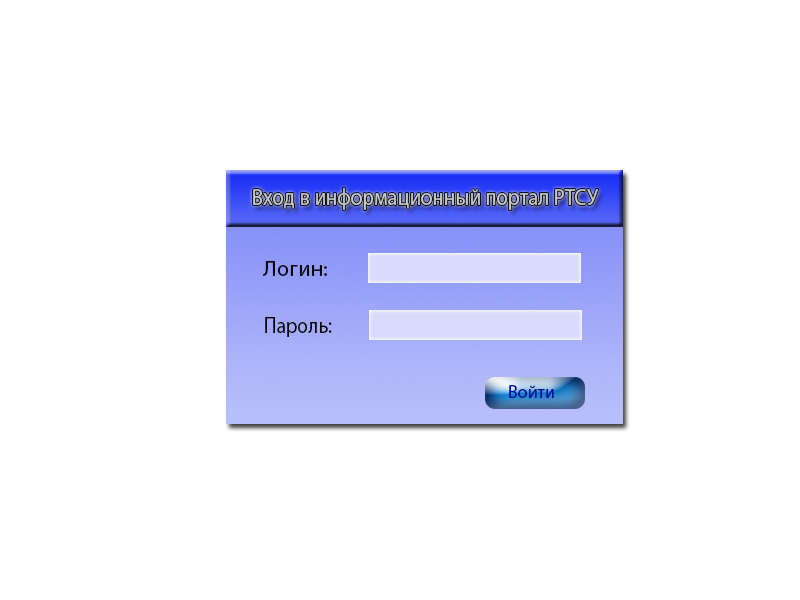
<style>
.page{position:relative;width:800px;height:600px;background:#ffffff}
.page>*{position:absolute;margin:0}
.t1{font:23px "MyriadPro-Regular";color:#c7c9c9;scale:0.91 1}
.t2{font:21.7px "MyriadPro-Regular";color:#050505;scale:1.06 1}
.t3{font:22.6px "MyriadPro-Regular";color:#050505;scale:0.87 1}
.t4{font:18px "MyriadPro-Regular";color:#000ba2}
</style>
<div class="page">
<p class="t1" style="left:253px;top:188px;width:346px;height:22px">Вход в информационный портал РТСУ</p>
<p class="t2" style="left:262px;top:261px;width:65px;height:15px">Логин:</p>
<p class="t3" style="left:265px;top:317px;width:67px;height:20px">Пароль:</p>
<p class="t4" style="left:509px;top:385px;width:45px;height:13px">Войти</p>
</div>
